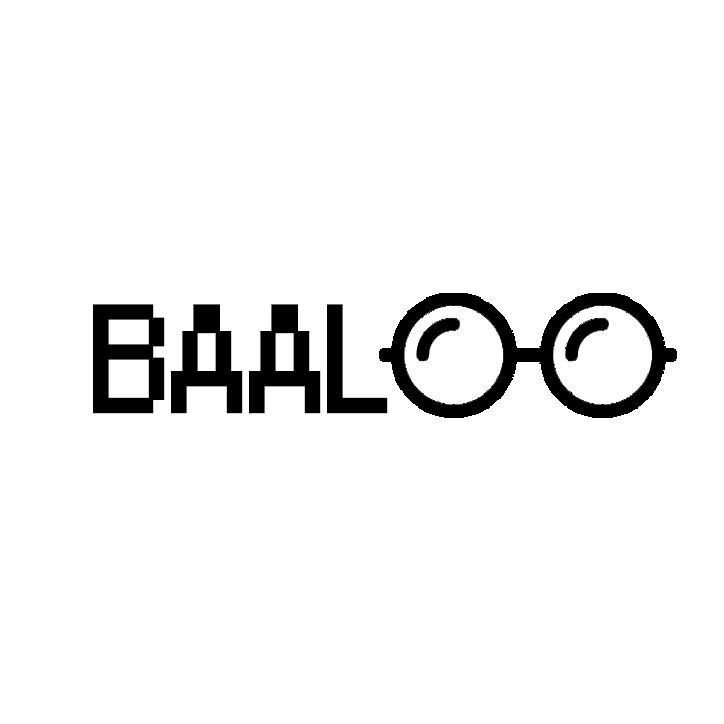
<style>
.page{position:relative;width:724px;height:724px;background:#ffffff}
.page>*{position:absolute;margin:0}
.t1{font:142.4px "Small Fonts";color:#000000;text-transform:uppercase;font-weight:bold}
</style>
<div class="page">
<p class="t1" style="left:93px;top:304px;width:295px;height:110px">BAaL</p>
</div>
